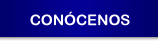
<style>
.page{position:relative;width:158px;height:49px}
.page>*{position:absolute;margin:0}
.t1{font:15px "ArialRoundedMTBold";color:#ffffff}
</style>
<div class="page">
<p class="t1" style="left:30px;top:11px;width:100px;height:15px">CONÓCENOS</p>
</div>
